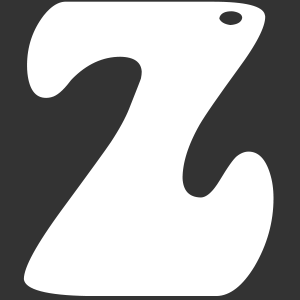
<style>
.page{position:relative;width:300px;height:300px;background:#ffffff}
.page>*{position:absolute;margin:0}
.t1{font:404.7px "aAbstractGroovy";letter-spacing:0.075em;color:#ffffff}
</style>
<div class="page">
<p class="t1" style="left:23px;top:1px;width:251px;height:295px">Z</p>
</div>
